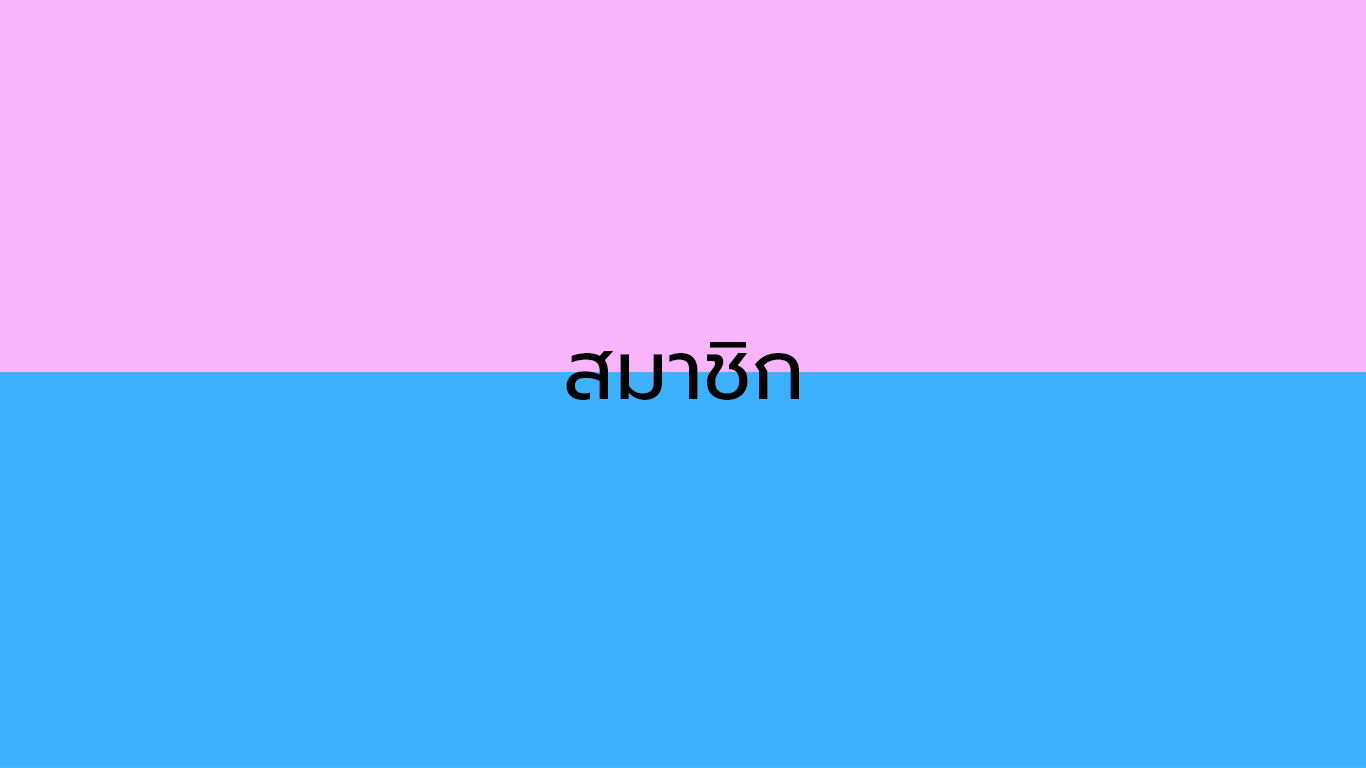
<style>
.page{position:relative;width:1366px;height:768px;background:#3eb1fe}
.page>*{position:absolute;margin:0}
.t1{font:83.3px "Prompt-Regular";color:#000000}
</style>
<div class="page">
<p class="t1" style="left:566px;top:342px;width:233px;height:58px">สมาชิก</p>
</div>
